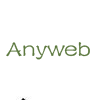
<style>
.page{position:relative;width:100px;height:100px;background:#ffffff}
.page>*{position:absolute;margin:0}
.t1{font:24px "FZSTK--GBK1-0";color:#5c783e}
</style>
<div class="page">
<p class="t1" style="left:6px;top:42px;width:84px;height:18px">Anyweb</p>
</div>
